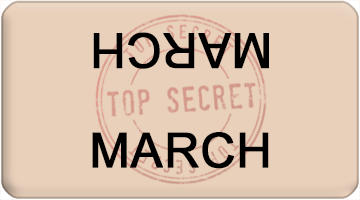
<style>
.page{position:relative;width:360px;height:200px;background:#e8d0bb}
.page>*{position:absolute;margin:0}
.t1{font:48px "ArialMT";color:#000000;font-weight:bold}
</style>
<div class="page">
<p class="t1" style="left:93px;top:32px;width:176px;height:37px;rotate:180deg">MARCH</p>
<p class="t1" style="left:92px;top:132px;width:177px;height:37px">MARCH</p>
</div>
